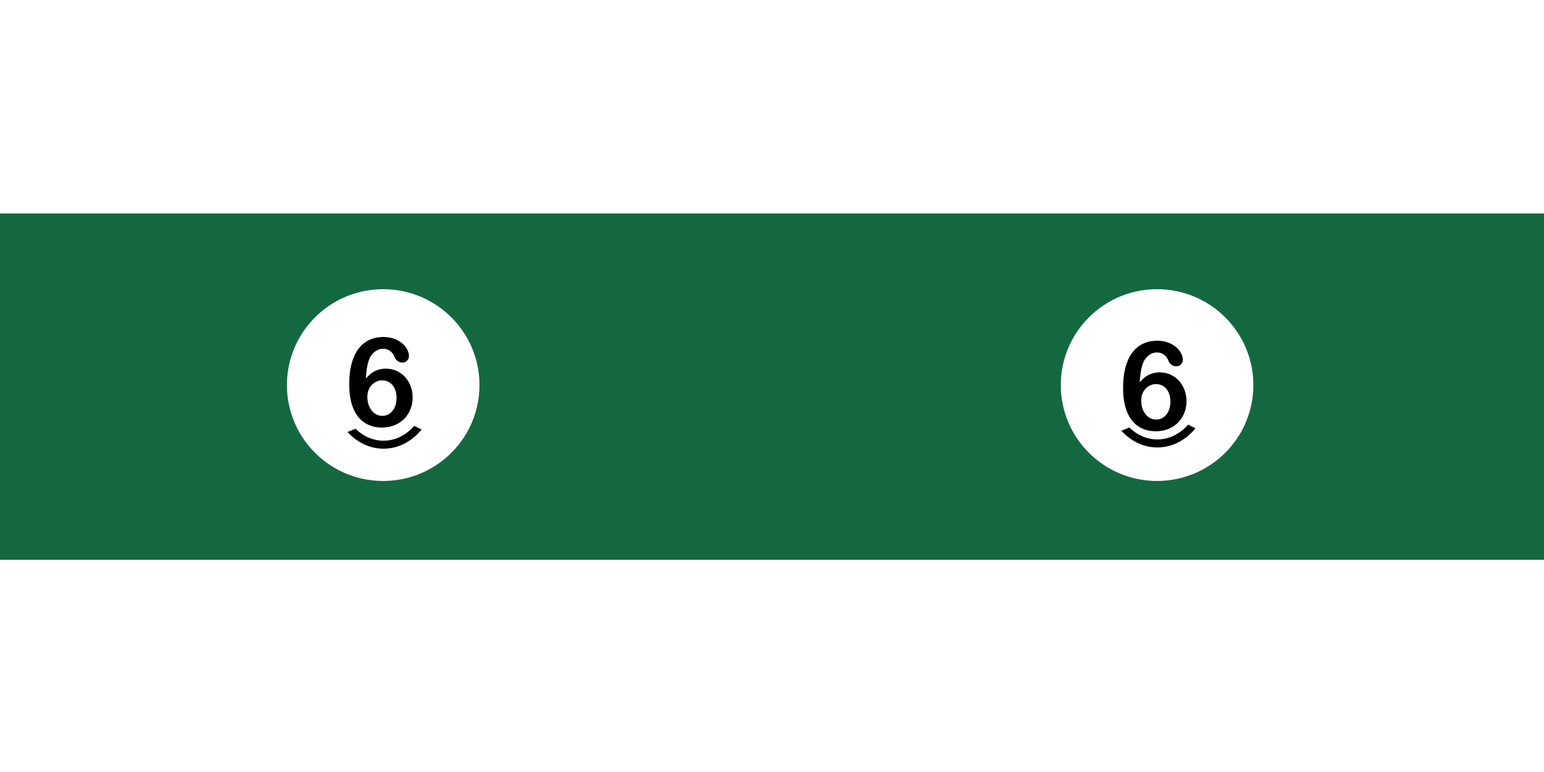
<style>
.page{position:relative;width:1544px;height:772px;background:#ffffff}
.page>*{position:absolute;margin:0}
.t1{font:124.2px "ArialRoundedMTBold";letter-spacing:-0.025em;color:#000000}
</style>
<div class="page">
<p class="t1" style="left:349px;top:337px;width:64px;height:91px">6</p>
<p class="t1" style="left:1123px;top:341px;width:64px;height:91px">6</p>
</div>
